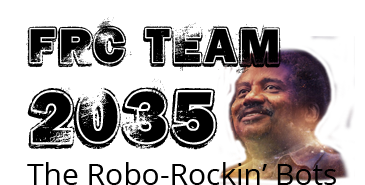
<style>
.page{position:relative;width:365px;height:185px;background:#ffffff}
.page>*{position:absolute;margin:0}
.t1{font:60px "HARDROCK";color:#000000}
.t2{font:90px "HARDROCK";color:#000000}
.t3{font:30px "OpenSans";color:#000000}
</style>
<div class="page">
<p class="t1" style="left:26px;top:17px;width:255px;height:57px">FRC Team</p>
<p class="t2" style="left:27px;top:78px;width:191px;height:72px">2035</p>
<p class="t3" style="left:27px;top:162px;width:309px;height:23px">The Robo-Rockin’ Bots</p>
</div>
